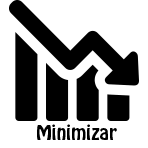
<style>
.page{position:relative;width:148px;height:148px;background:#ffffff}
.page>*{position:absolute;margin:0}
.t1{font:18px "HoboStd";color:#000000}
</style>
<div class="page">
<p class="t1" style="left:37px;top:124px;width:80px;height:16px">Minimizar</p>
</div>
